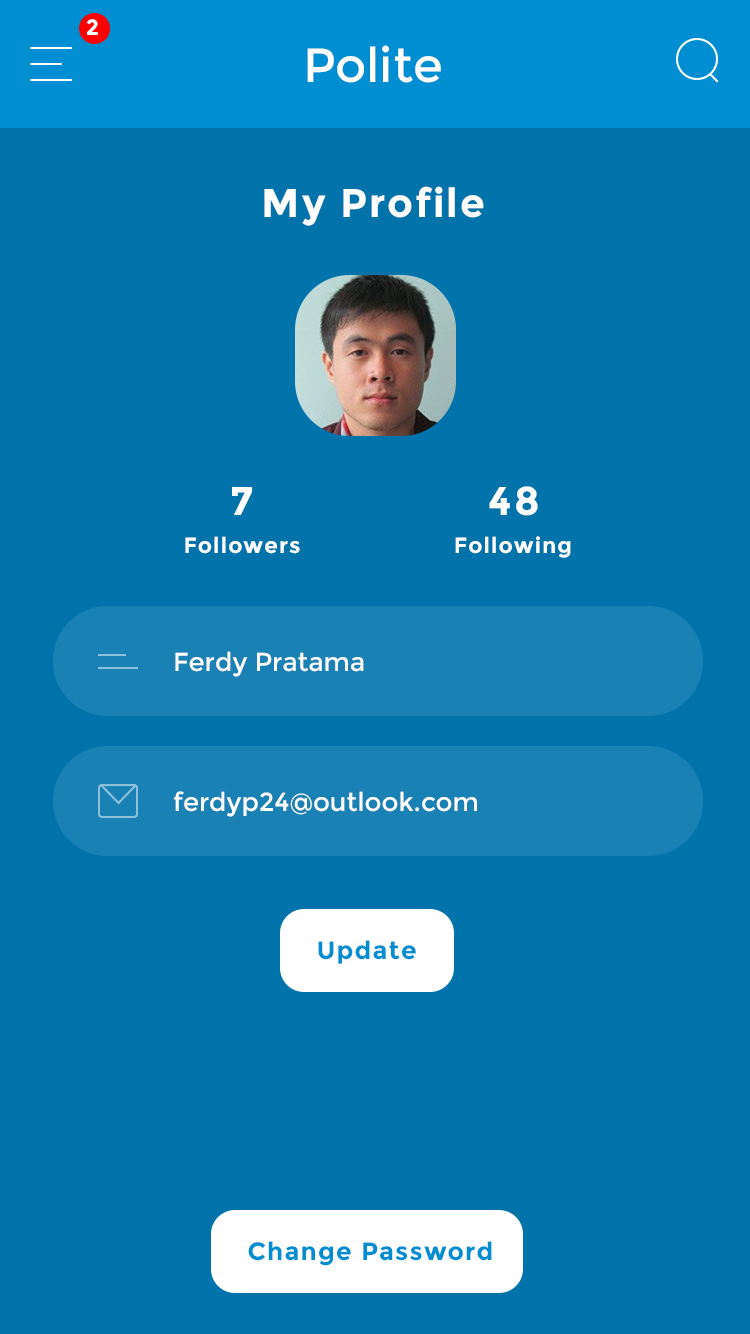
<style>
.page{position:relative;width:750px;height:1334px;background:#0073ab}
.page>*{position:absolute;margin:0}
.t1{font:22px "Montserrat-Bold";letter-spacing:0.05em;color:#ffffff}
.t2{font:48px "Montserrat-Regular";color:#ffffff}
.t3{font:40px "Montserrat-Bold";letter-spacing:0.05em;color:#ffffff}
.t4{font:26px "Montserrat-Regular";color:#ffffff}
.t5{font:25px "Montserrat-Bold";letter-spacing:0.05em;color:#008ed3}
</style>
<div class="page">
<p class="t1" style="left:86px;top:19px;width:12px;height:16px">2</p>
<p class="t2" style="left:307px;top:45px;width:134px;height:38px">Polite</p>
<p class="t3" style="left:264px;top:186px;width:220px;height:40px">My Profile</p>
<p class="t3" style="left:489px;top:486px;width:49px;height:30px">48</p>
<p class="t3" style="left:232px;top:487px;width:20px;height:28px">7</p>
<p class="t1" style="left:185px;top:536px;width:115px;height:18px">Followers</p>
<p class="t1" style="left:455px;top:536px;width:116px;height:22px">Following</p>
<p class="t4" style="left:175px;top:651px;width:189px;height:26px">Ferdy Pratama</p>
<p class="t4" style="left:174px;top:791px;width:303px;height:26px">ferdyp24@outlook.com</p>
<p class="t5" style="left:318px;top:940px;width:98px;height:24px">Update</p>
<p class="t5" style="left:248px;top:1241px;width:244px;height:25px">Change Password</p>
</div>
